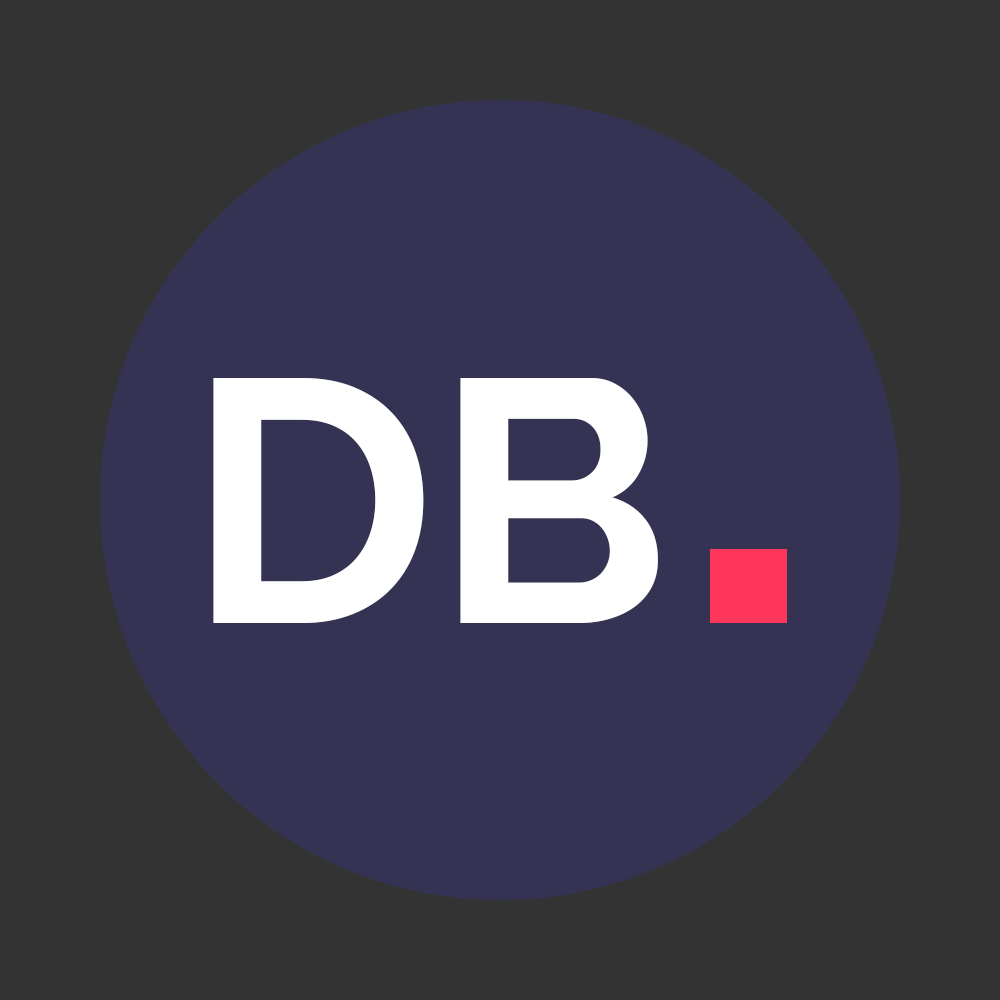
<style>
.page{position:relative;width:1000px;height:1000px;background:#333333}
.page>*{position:absolute;margin:0}
.t1{font:345.4px "Raleway-Bold";color:#ffffff}
</style>
<div class="page">
<p class="t1" style="left:213px;top:378px;width:445px;height:245px">DB</p>
</div>
